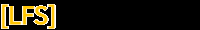
<style>
.page{position:relative;width:200px;height:30px;background:#000000}
.page>*{position:absolute;margin:0}
.t1{font:24px "WebPSD-18463539-0-Regular";color:#ffc400;font-weight:bold}
</style>
<div class="page">
<p class="t1" style="left:0px;top:0px;width:200px;height:30px">[LFS]</p>
</div>
